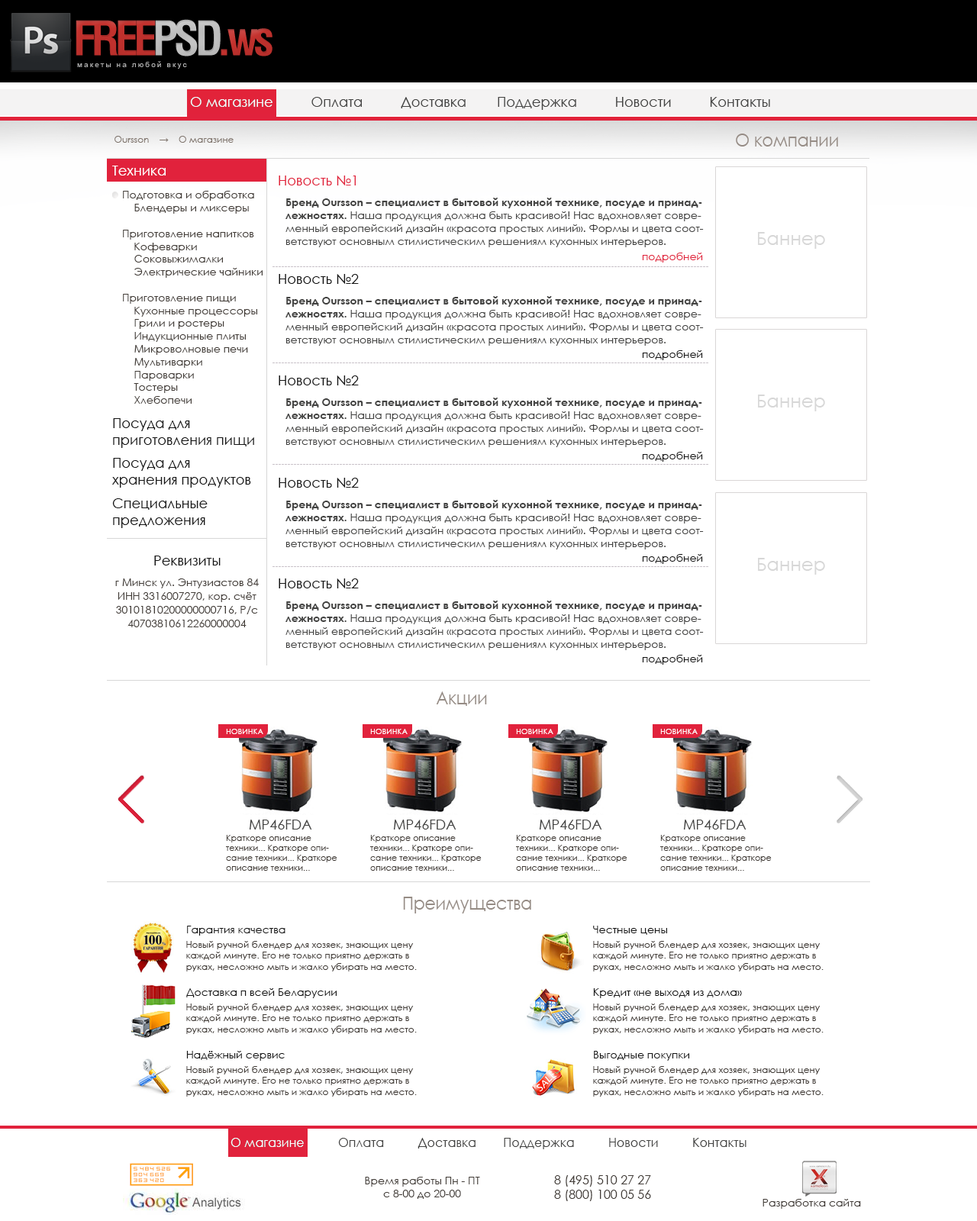
<style>
.page{position:relative;width:977px;height:1221px;background:#ffffff}
.page>*{position:absolute;margin:0}
.t1{font:13.7px "CenturyGothic";color:#434342}
.t2{font:13.7px "CenturyGothic";color:#ffffff}
.t3{font:9.2px "CenturyGothic";color:#7f746c}
.t4{font:18.3px "CenturyGothic";color:#968c85;scale:0.9 1}
.t5{font:13.7px "CenturyGothic";color:#e1223b}
.t6{font:10.7px "CenturyGothic";color:#423c37}
.t7{font:10.7px "CenturyGothic";color:#434342}
.t8{font:10.7px "CenturyGothic-Bold";color:#434342}
.t9{font:10.7px "CenturyGothic";color:#e1223b}
.t10{font:13.7px "CenturyGothic";color:#151515}
.t11{font:10.7px "CenturyGothic";color:#151515}
.t12{font:10.7px/13.7px "CenturyGothic";color:#423c37}
.t13{font:7.6px "CenturyGothic";color:#ffffff;text-transform:uppercase}
.t14{font:8.4px "CenturyGothic";color:#423c37}
.t15{font:9.2px "CenturyGothic";color:#423c37}
.t16{font:12.2px "CenturyGothic";color:#434342}
.t17{font:12.2px "CenturyGothic";color:#ffffff}
.t18{font:12.2px "CenturyGothic";color:#423c37}
</style>
<div class="page">
<p class="t1" style="left:190px;top:97px;width:580px;height:13px">О магазине          Оплата          Доставка        Поддержка          Новости          Контакты</p>
<p class="t2" style="left:190px;top:97px;width:82px;height:10px">О магазине</p>
<p class="t3" style="left:114px;top:136px;width:119px;height:7px">Oursson    →    О магазине</p>
<p class="t4" style="left:736px;top:134px;width:102px;height:13px">О компании</p>
<p class="t2" style="left:112px;top:166px;width:54px;height:10px">Техника</p>
<p class="t5" style="left:279px;top:176px;width:77px;height:9px">Новость №1</p>
<p class="t6" style="left:123px;top:191px;width:139px;height:213px">Подготовка и обработка<br>    Блендеры и миксеры<br><br>Приготовление напитков<br>    Кофеварки<br>    Соковыжималки<br>    Электрические чайники<br><br>Приготовление пищи<br>    Кухонные процессоры<br>    Грили и ростеры<br>    Индукционные плиты<br>    Микроволновые печи<br>    Мультиварки<br>    Пароварки<br>    Тостеры<br>    Хлебопечи</p>
<p class="t7" style="left:285px;top:198px;width:419px;height:49px"><span class="t8">Бренд Oursson – специалист в бытовой кухонной технике, посуде и принадлежностях. </span>Наша продукция должна быть красивой! Нас вдохновляет современный европейский дизайн «красота простых линий». Формы и цвета соответствуют основным стилистическим решениям кухонных интерьеров.</p>
<p class="t9" style="left:642px;top:253px;width:61px;height:9px">подробней</p>
<p class="t10" style="left:279px;top:274px;width:80px;height:10px">Новость №2</p>
<p class="t7" style="left:285px;top:296px;width:419px;height:50px"><span class="t8">Бренд Oursson – специалист в бытовой кухонной технике, посуде и принадлежностях. </span>Наша продукция должна быть красивой! Нас вдохновляет современный европейский дизайн «красота простых линий». Формы и цвета соответствуют основным стилистическим решениям кухонных интерьеров.</p>
<p class="t11" style="left:642px;top:350px;width:61px;height:10px">подробней</p>
<p class="t10" style="left:279px;top:375px;width:80px;height:10px">Новость №2</p>
<p class="t7" style="left:285px;top:398px;width:419px;height:49px"><span class="t8">Бренд Oursson – специалист в бытовой кухонной технике, посуде и принадлежностях. </span>Наша продукция должна быть красивой! Нас вдохновляет современный европейский дизайн «красота простых линий». Формы и цвета соответствуют основным стилистическим решениям кухонных интерьеров.</p>
<p class="t10" style="left:113px;top:418px;width:141px;height:30px">Посуда для <br>приготовления пищи</p>
<p class="t10" style="left:112px;top:458px;width:139px;height:30px">Посуда для <br>хранения продуктов</p>
<p class="t11" style="left:642px;top:452px;width:61px;height:10px">подробней</p>
<p class="t10" style="left:279px;top:478px;width:80px;height:10px">Новость №2</p>
<p class="t10" style="left:112px;top:498px;width:96px;height:30px">Специальные <br>предложения</p>
<p class="t7" style="left:285px;top:500px;width:419px;height:49px"><span class="t8">Бренд Oursson – специалист в бытовой кухонной технике, посуде и принадлежностях. </span>Наша продукция должна быть красивой! Нас вдохновляет современный европейский дизайн «красота простых линий». Формы и цвета соответствуют основным стилистическим решениям кухонных интерьеров.</p>
<p class="t10" style="left:154px;top:555px;width:67px;height:10px">Реквизиты</p>
<p class="t11" style="left:642px;top:554px;width:61px;height:10px">подробней</p>
<p class="t12" style="left:115px;top:578px;width:144px;height:49px;text-align:center">г Минск ул. Энтузиастов 84<br>ИНН 3316007270, кор. счёт 30101810200000000716, Р/с 40703810612260000004</p>
<p class="t10" style="left:279px;top:578px;width:80px;height:10px">Новость №2</p>
<p class="t7" style="left:285px;top:601px;width:419px;height:49px"><span class="t8">Бренд Oursson – специалист в бытовой кухонной технике, посуде и принадлежностях. </span>Наша продукция должна быть красивой! Нас вдохновляет современный европейский дизайн «красота простых линий». Формы и цвета соответствуют основным стилистическим решениям кухонных интерьеров.</p>
<p class="t11" style="left:642px;top:655px;width:61px;height:10px">подробней</p>
<p class="t4" style="left:436px;top:691px;width:51px;height:15px">Акции</p>
<p class="t13" style="left:226px;top:729px;width:37px;height:5px">Новинка</p>
<p class="t13" style="left:370px;top:729px;width:37px;height:5px">Новинка</p>
<p class="t13" style="left:516px;top:729px;width:37px;height:5px">Новинка</p>
<p class="t13" style="left:660px;top:729px;width:37px;height:5px">Новинка</p>
<p class="t1" style="left:249px;top:820px;width:63px;height:9px">MP46FDA</p>
<p class="t1" style="left:393px;top:820px;width:63px;height:9px">MP46FDA</p>
<p class="t1" style="left:539px;top:820px;width:63px;height:9px">MP46FDA</p>
<p class="t1" style="left:683px;top:820px;width:63px;height:9px">MP46FDA</p>
<p class="t14" style="left:226px;top:835px;width:111px;height:36px">Краткоре описание техники... Краткоре описание техники... Краткоре описание техники...</p>
<p class="t14" style="left:370px;top:835px;width:111px;height:36px">Краткоре описание техники... Краткоре описание техники... Краткоре описание техники...</p>
<p class="t14" style="left:516px;top:835px;width:111px;height:36px">Краткоре описание техники... Краткоре описание техники... Краткоре описание техники...</p>
<p class="t14" style="left:660px;top:835px;width:111px;height:36px">Краткоре описание техники... Краткоре описание техники... Краткоре описание техники...</p>
<p class="t4" style="left:403px;top:897px;width:128px;height:16px">Преимущества</p>
<p class="t11" style="left:187px;top:926px;width:98px;height:9px">Гарантия качества</p>
<p class="t11" style="left:593px;top:926px;width:74px;height:9px">Честные цены</p>
<p class="t15" style="left:186px;top:941px;width:231px;height:30px">Новый ручной блендер для хозяек, знающих цену каждой минуте. Его не только приятно держать в руках, несложно мыть и жалко убирать на место.</p>
<p class="t15" style="left:593px;top:941px;width:230px;height:30px">Новый ручной блендер для хозяек, знающих цену каждой минуте. Его не только приятно держать в руках, несложно мыть и жалко убирать на место.</p>
<p class="t11" style="left:186px;top:988px;width:151px;height:10px">Доставка п всей Беларусии</p>
<p class="t11" style="left:593px;top:988px;width:149px;height:10px">Кредит «не выходя из дома»</p>
<p class="t15" style="left:186px;top:1003px;width:231px;height:31px">Новый ручной блендер для хозяек, знающих цену каждой минуте. Его не только приятно держать в руках, несложно мыть и жалко убирать на место.</p>
<p class="t15" style="left:593px;top:1003px;width:230px;height:31px">Новый ручной блендер для хозяек, знающих цену каждой минуте. Его не только приятно держать в руках, несложно мыть и жалко убирать на место.</p>
<p class="t11" style="left:186px;top:1051px;width:99px;height:10px">Надёжный сервис</p>
<p class="t11" style="left:594px;top:1051px;width:95px;height:10px">Выгодные покупки</p>
<p class="t15" style="left:186px;top:1066px;width:231px;height:31px">Новый ручной блендер для хозяек, знающих цену каждой минуте. Его не только приятно держать в руках, несложно мыть и жалко убирать на место.</p>
<p class="t15" style="left:593px;top:1066px;width:230px;height:31px">Новый ручной блендер для хозяек, знающих цену каждой минуте. Его не только приятно держать в руках, несложно мыть и жалко убирать на место.</p>
<p class="t16" style="left:230px;top:1138px;width:516px;height:11px">О магазине          Оплата          Доставка        Поддержка          Новости          Контакты</p>
<p class="t17" style="left:230px;top:1138px;width:74px;height:9px">О магазине</p>
<p class="t6" style="left:365px;top:1177px;width:115px;height:22px;text-align:center">Время работы Пн - ПТ<br>с 8-00 до 20-00</p>
<p class="t18" style="left:554px;top:1175px;width:97px;height:26px;text-align:center">8 (495) 510 27 27     <br>8 (800) 100 05 56</p>
<p class="t6" style="left:762px;top:1199px;width:99px;height:10px">Разработка сайта</p>
</div>
